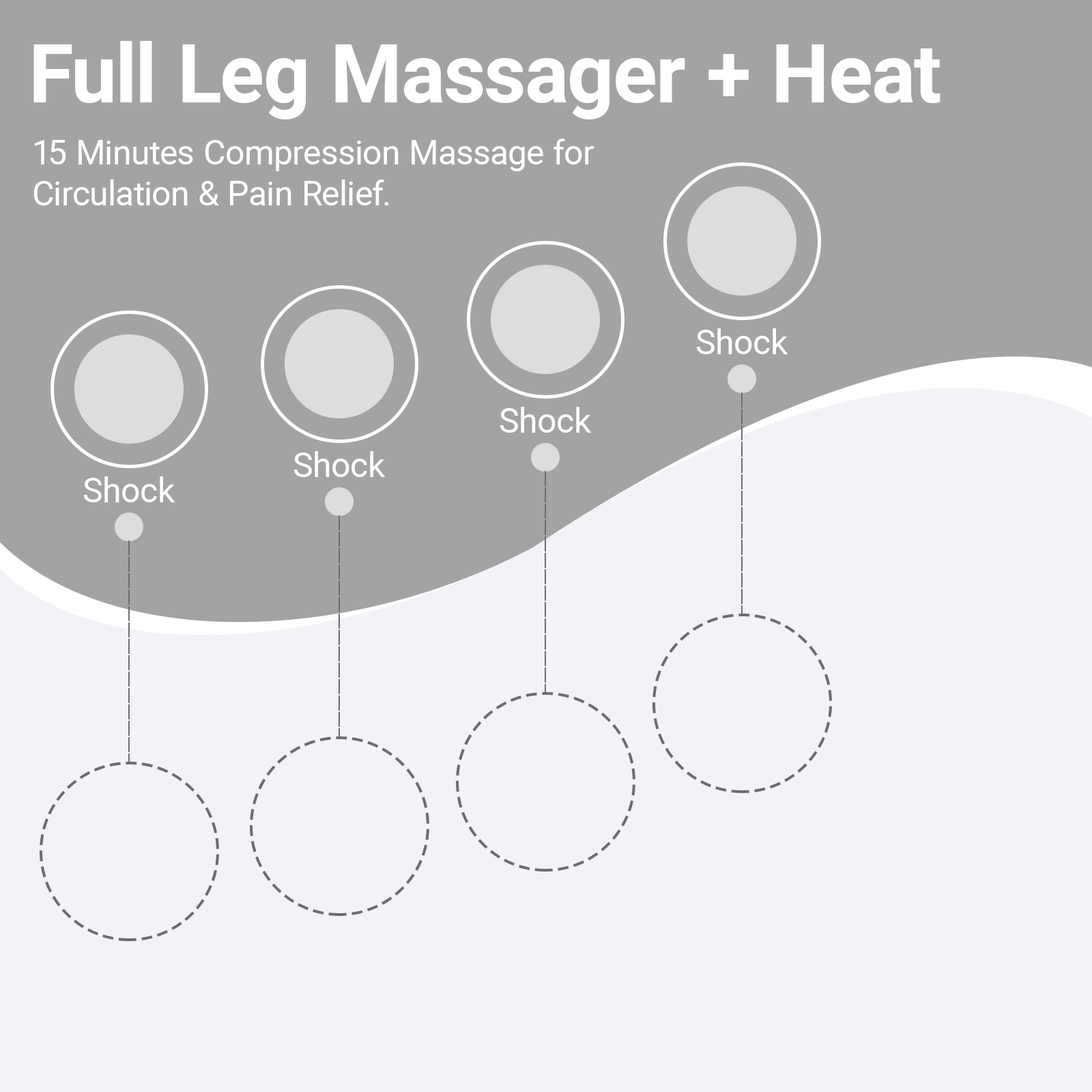
<style>
.page{position:relative;width:1092px;height:1092px;background:#f2f3f6}
.page>*{position:absolute;margin:0}
.t1{font:81.9px "Roboto-Bold";color:#ffffff}
.t2{font:34.1px "Roboto-Regular";color:#ffffff}
</style>
<div class="page">
<p class="t1" style="left:33px;top:41px;width:907px;height:78px">Full Leg Massager + Heat</p>
<p class="t2" style="left:33px;top:139px;width:561px;height:66px">15 Minutes Compression Massage for<br>Circulation &amp; Pain Relief.</p>
<p class="t2" style="left:697px;top:328px;width:91px;height:26px">Shock</p>
<p class="t2" style="left:500px;top:407px;width:92px;height:26px">Shock</p>
<p class="t2" style="left:294px;top:451px;width:92px;height:26px">Shock</p>
<p class="t2" style="left:84px;top:476px;width:91px;height:26px">Shock</p>
</div>
